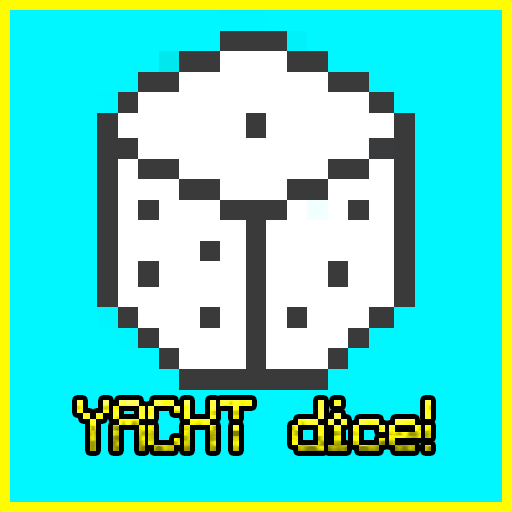
<style>
.page{position:relative;width:512px;height:512px;background:#00f7ff}
.page>*{position:absolute;margin:0}
.t1{font:128px "VoidPixel-7"}
</style>
<div class="page">
<p class="t1" style="left:77px;top:400px;width:354px;height:51px">YACHT dice!</p>
</div>
